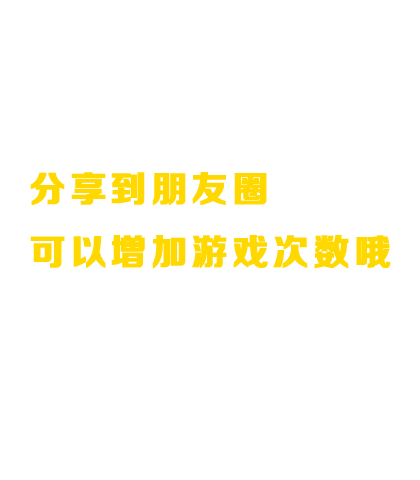
<style>
.page{position:relative;width:420px;height:480px;background:#ffffff}
.page>*{position:absolute;margin:0}
.t1{font:36px "FZZDHJW--GB1-0";letter-spacing:0.1em;color:#ffd800;font-weight:bold}
</style>
<div class="page">
<p class="t1" style="left:30px;top:172px;width:361px;height:97px">分享到朋友圈<br>可以增加游戏次数哦</p>
</div>
